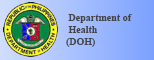
<style>
.page{position:relative;width:154px;height:60px}
.page>*{position:absolute;margin:0}
.t1{font:10px "TimesNewRomanPS-BoldMT";color:#454545}
</style>
<div class="page">
<p class="t1" style="left:66px;top:14px;width:66px;height:33px;text-align:right">Department of <br>Health <br>(DOH)</p>
</div>
